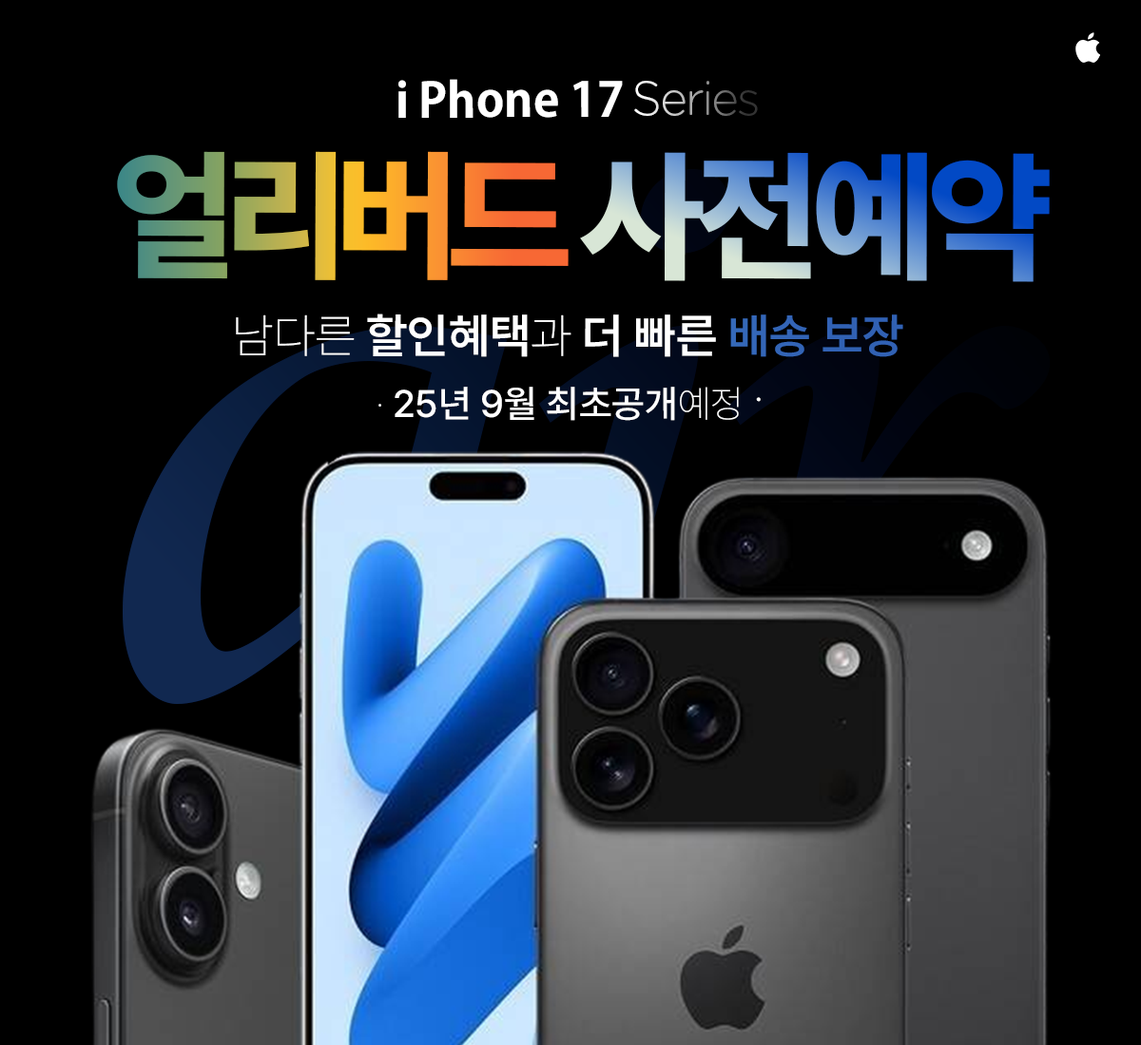
<style>
.page{position:relative;width:1141px;height:1045px;background:#000000}
.page>*{position:absolute;margin:0}
.t1{font:47.5px "AdobeGothicStd-Bold";color:#ffffff}
.t2{font:47.5px "GothamRounded-Light";letter-spacing:-0.05em}
.t3{font:142.6px "Pretendard-ExtraBold";letter-spacing:-0.08em;text-transform:uppercase}
.t4{font:142.6px "Pretendard-ExtraBold";letter-spacing:-0.05em;text-transform:uppercase}
.t5{font:47.5px "Pretendard-SemiBold";color:#3161b3}
.t6{font:47.5px "Pretendard-Thin";color:#ffffff}
.t7{font:47.5px "Pretendard-SemiBold";color:#ffffff}
.t8{font:38px "Pretendard-Medium";color:#ffffff}
.t9{font:38px "Pretendard-Thin";color:#ffffff}
.t10{font:57px "Pretendard-Thin";color:#ffffff}
</style>
<div class="page">
<p class="t1" style="left:398px;top:79px;width:225px;height:39px">i Phone 17</p>
<p class="t2" style="left:634px;top:81px;width:124px;height:35px">Series</p>
<p class="t3" style="left:117px;top:151px;width:451px;height:129px">얼리버드</p>
<p class="t4" style="left:580px;top:152px;width:469px;height:130px">사전예약</p>
<p class="t5" style="left:236px;top:314px;width:667px;height:43px"><span class="t6">남다른 </span><span class="t7">할인혜택</span><span class="t6">과 </span><span class="t7">더 빠른 </span>배송 보장</p>
<p class="t8" style="left:378px;top:387px;width:382px;height:34px"><span class="t9">· </span>25년 9월 최초공개<span class="t9">예정 </span><span class="t10">·</span></p>
</div>
